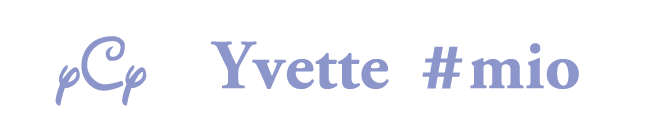
<style>
.page{position:relative;width:666px;height:128px;background:#ffffff}
.page>*{position:absolute;margin:0}
.t1{font:70px "AGaramondPro-Bold";color:#8c97cb}
.t2{font:72px "WaltDisneyScript";color:#8c97cb}
.t3{font:70px "BritannicBold";color:#8c97cb}
</style>
<div class="page">
<p class="t1" style="left:55px;top:36px;width:524px;height:70px"><span class="t2">yCy    </span>Yvette     mio</p>
<p class="t3" style="left:422px;top:46px;width:41px;height:43px">#</p>
</div>
